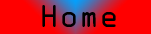
<style>
.page{position:relative;width:151px;height:34px;background:#ff0000}
.page>*{position:absolute;margin:0}
.t1{font:28.3px "OCRAStd";color:#000000}
</style>
<div class="page">
<p class="t1" style="left:42px;top:5px;width:74px;height:22px">Home</p>
</div>
